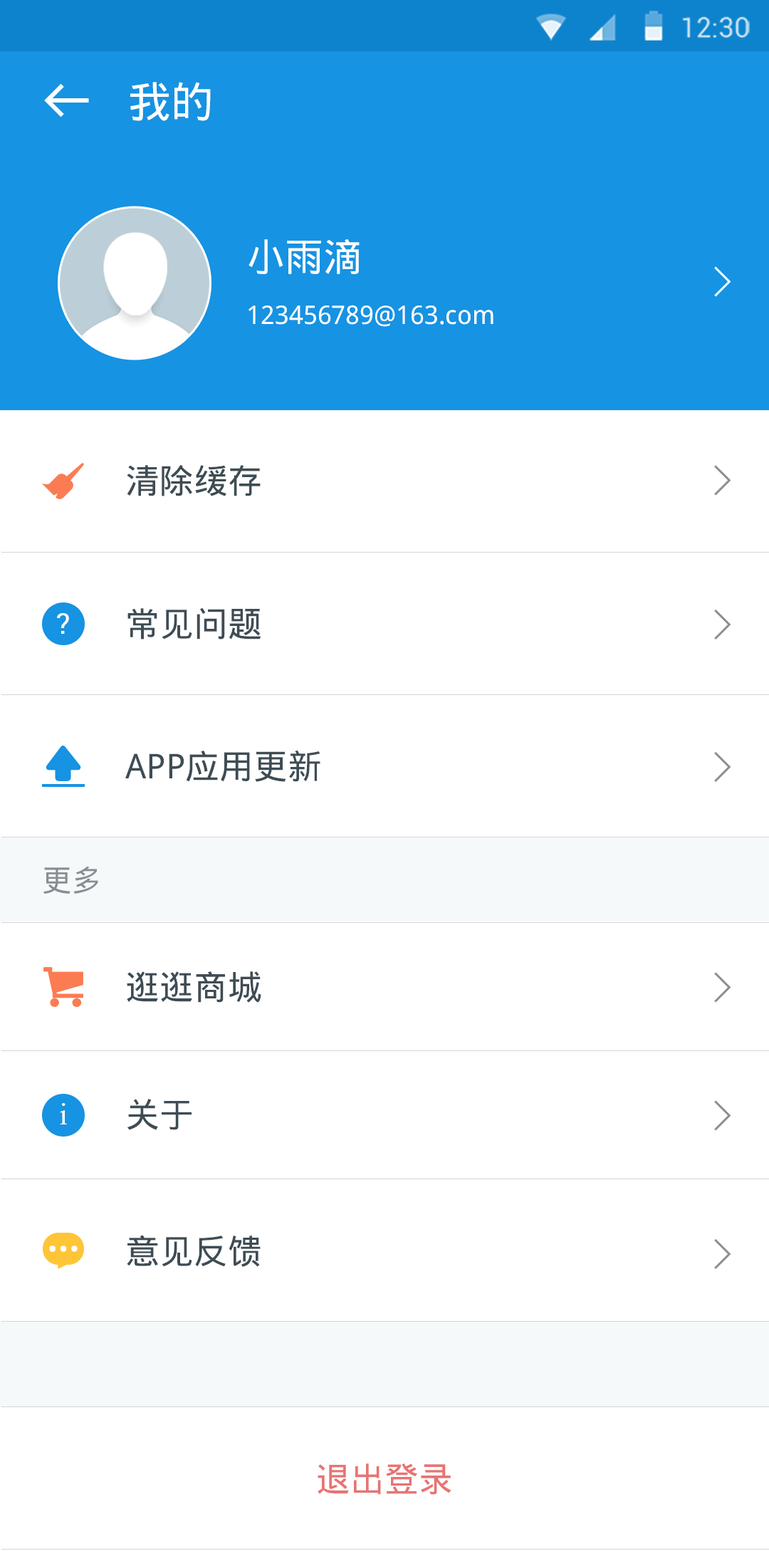
<style>
.page{position:relative;width:769px;height:1551px;background:#ffffff}
.page>*{position:absolute;margin:0}
.t1{font:42.7px "DroidSansFallback";color:#ffffff}
.t2{font:38.4px "DroidSansFallback";color:#ffffff}
.t3{font:25.6px "DroidSansFallback";color:#ffffff}
.t4{font:34.2px "DroidSansFallback";color:#3e4c54}
.t5{font:29.3px "Roboto-Regular";color:#ffffff}
.t6{font:29.9px "DroidSansFallback";color:#878e93}
.t7{font:36.8px "ShonarBangla";color:#ffffff}
.t8{font:34.2px "DroidSansFallback";color:#e87373}
</style>
<div class="page">
<p class="t1" style="left:130px;top:82px;width:81px;height:39px">我的</p>
<p class="t2" style="left:248px;top:239px;width:112px;height:35px">小雨滴</p>
<p class="t3" style="left:248px;top:305px;width:245px;height:22px">123456789@163.com</p>
<p class="t4" style="left:127px;top:465px;width:134px;height:31px">清除缓存</p>
<p class="t5" style="left:57px;top:613px;width:12px;height:21px">?</p>
<p class="t4" style="left:127px;top:607px;width:134px;height:32px">常见问题</p>
<p class="t4" style="left:125px;top:750px;width:195px;height:32px">APP应用更新</p>
<p class="t6" style="left:43px;top:866px;width:55px;height:28px">更多</p>
<p class="t4" style="left:127px;top:971px;width:134px;height:31px">逛逛商城</p>
<p class="t7" style="left:60px;top:1103px;width:7px;height:21px">i</p>
<p class="t4" style="left:127px;top:1099px;width:65px;height:31px">关于</p>
<p class="t4" style="left:127px;top:1235px;width:134px;height:32px">意见反馈</p>
<p class="t8" style="left:318px;top:1463px;width:133px;height:31px">退出登录</p>
</div>
